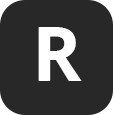
<style>
.page{position:relative;width:114px;height:115px;background:#282828}
.page>*{position:absolute;margin:0}
.t1{font:74.7px "NotoSans-Bold";color:#ffffff}
</style>
<div class="page">
<p class="t1" style="left:38px;top:27px;width:44px;height:54px">R</p>
</div>
